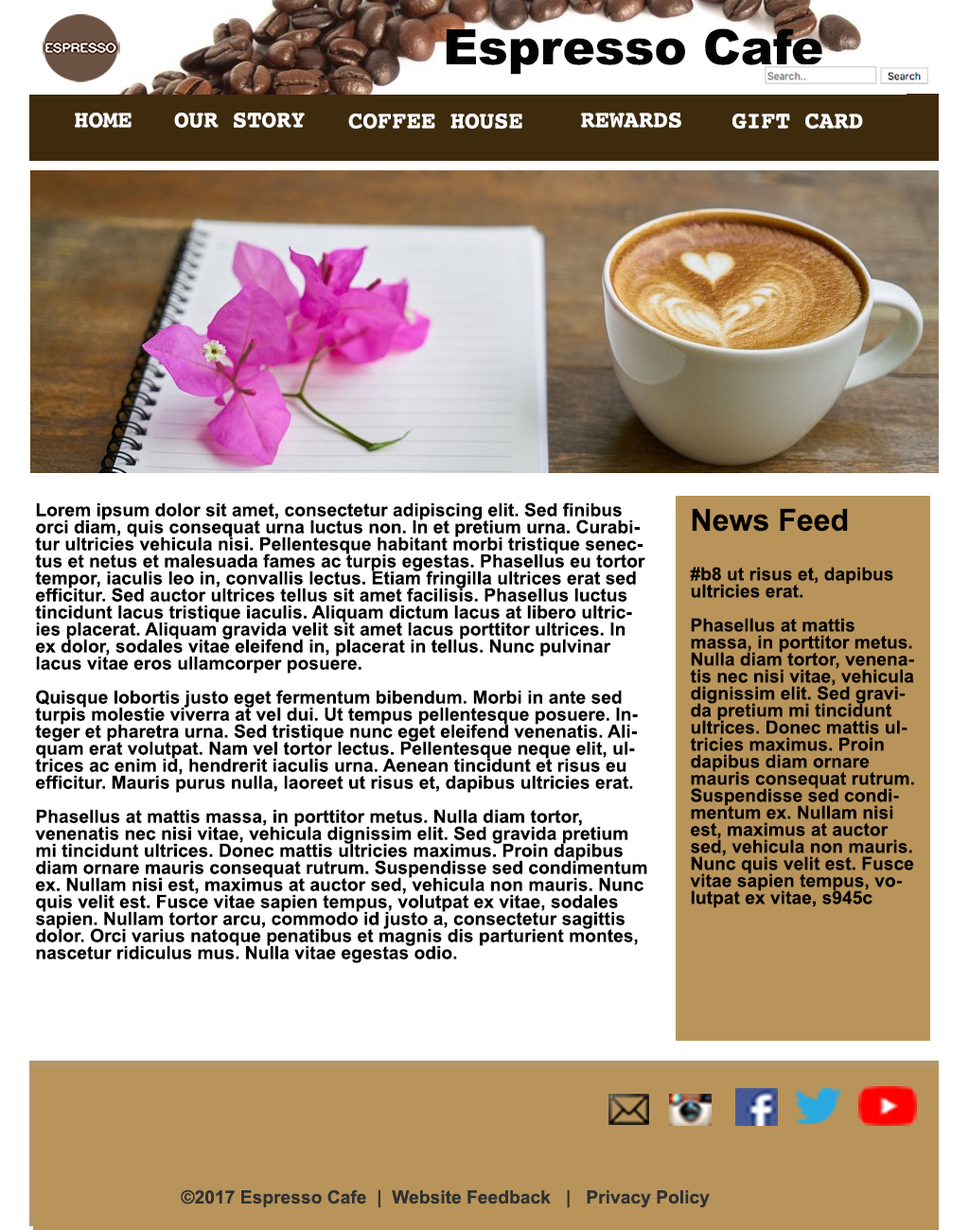
<style>
.page{position:relative;width:969px;height:1230px;background:#ffffff}
.page>*{position:absolute;margin:0}
.t1{font:48.6px "Arial-Black";color:#030303}
.t2{font:24.3px "Courier-Bold";color:#fdfcfc}
.t3{font:18.2px/17px "Arial-BoldMT";color:#000000}
.t4{font:18.2px/17px "Arial-BoldMT";color:#060400}
.t5{font:30.4px "Arial-BoldMT";color:#000000}
.t6{font:18.2px "Arial-BoldMT";color:#313131}
.t7{font:10.4px "Arial-BoldMT";color:#313131}
</style>
<div class="page">
<p class="t1" style="left:446px;top:28px;width:376px;height:47px">Espresso Cafe</p>
<p class="t2" style="left:75px;top:113px;width:57px;height:15px">HOME</p>
<p class="t2" style="left:174px;top:113px;width:131px;height:15px">OUR STORY</p>
<p class="t2" style="left:348px;top:114px;width:174px;height:15px">COFFEE HOUSE</p>
<p class="t2" style="left:581px;top:113px;width:100px;height:15px">REWARDS</p>
<p class="t2" style="left:733px;top:114px;width:130px;height:15px">GIFT CARD</p>
<p class="t3" style="left:35px;top:503px;width:612px;height:460px"><span class="t4"><br></span>Lorem ipsum dolor sit amet, consectetur adipiscing elit. Sed finibus orci diam, quis consequat urna luctus non. In et pretium urna. Curabitur ultricies vehicula nisi. Pellentesque habitant morbi tristique senectus et netus et malesuada fames ac turpis egestas. Phasellus eu tortor tempor, iaculis leo in, convallis lectus. Etiam fringilla ultrices erat sed efficitur. Sed auctor ultrices tellus sit amet facilisis. Phasellus luctus tincidunt lacus tristique iaculis. Aliquam dictum lacus at libero ultricies placerat. Aliquam gravida velit sit amet lacus porttitor ultrices. In ex dolor, sodales vitae eleifend in, placerat in tellus. Nunc pulvinar lacus vitae eros ullamcorper posuere.<br><br>Quisque lobortis justo eget fermentum bibendum. Morbi in ante sed turpis molestie viverra at vel dui. Ut tempus pellentesque posuere. Integer et pharetra urna. Sed tristique nunc eget eleifend venenatis. Aliquam erat volutpat. Nam vel tortor lectus. Pellentesque neque elit, ultrices ac enim id, hendrerit iaculis urna. Aenean tincidunt et risus eu efficitur. Mauris purus nulla, laoreet ut risus et, dapibus ultricies erat.<br><br>Phasellus at mattis massa, in porttitor metus. Nulla diam tortor, venenatis nec nisi vitae, vehicula dignissim elit. Sed gravida pretium mi tincidunt ultrices. Donec mattis ultricies maximus. Proin dapibus diam ornare mauris consequat rutrum. Suspendisse sed condimentum ex. Nullam nisi est, maximus at auctor sed, vehicula non mauris. Nunc quis velit est. Fusce vitae sapien tempus, volutpat ex vitae, sodales sapien. Nullam tortor arcu, commodo id justo a, consectetur sagittis dolor. Orci varius natoque penatibus et magnis dis parturient montes, nascetur ridiculus mus. Nulla vitae egestas odio.</p>
<p class="t5" style="left:692px;top:508px;width:156px;height:24px">News Feed</p>
<p class="t3" style="left:690px;top:567px;width:224px;height:342px">#b8 ut risus et, dapibus ultricies erat.<br><br>Phasellus at mattis massa, in porttitor metus. Nulla diam tortor, venenatis nec nisi vitae, vehicula dignissim elit. Sed gravida pretium mi tincidunt ultrices. Donec mattis ultricies maximus. Proin dapibus diam ornare mauris consequat rutrum. Suspendisse sed condimentum ex. Nullam nisi est, maximus at auctor sed, vehicula non mauris. Nunc quis velit est. Fusce vitae sapien tempus, volutpat ex vitae, s945c</p>
<p class="t6" style="left:181px;top:1190px;width:529px;height:19px"><span class="t7">             </span>               ©2017 Espresso Cafe  |  Website Feedback   |   Privacy Policy</p>
</div>
